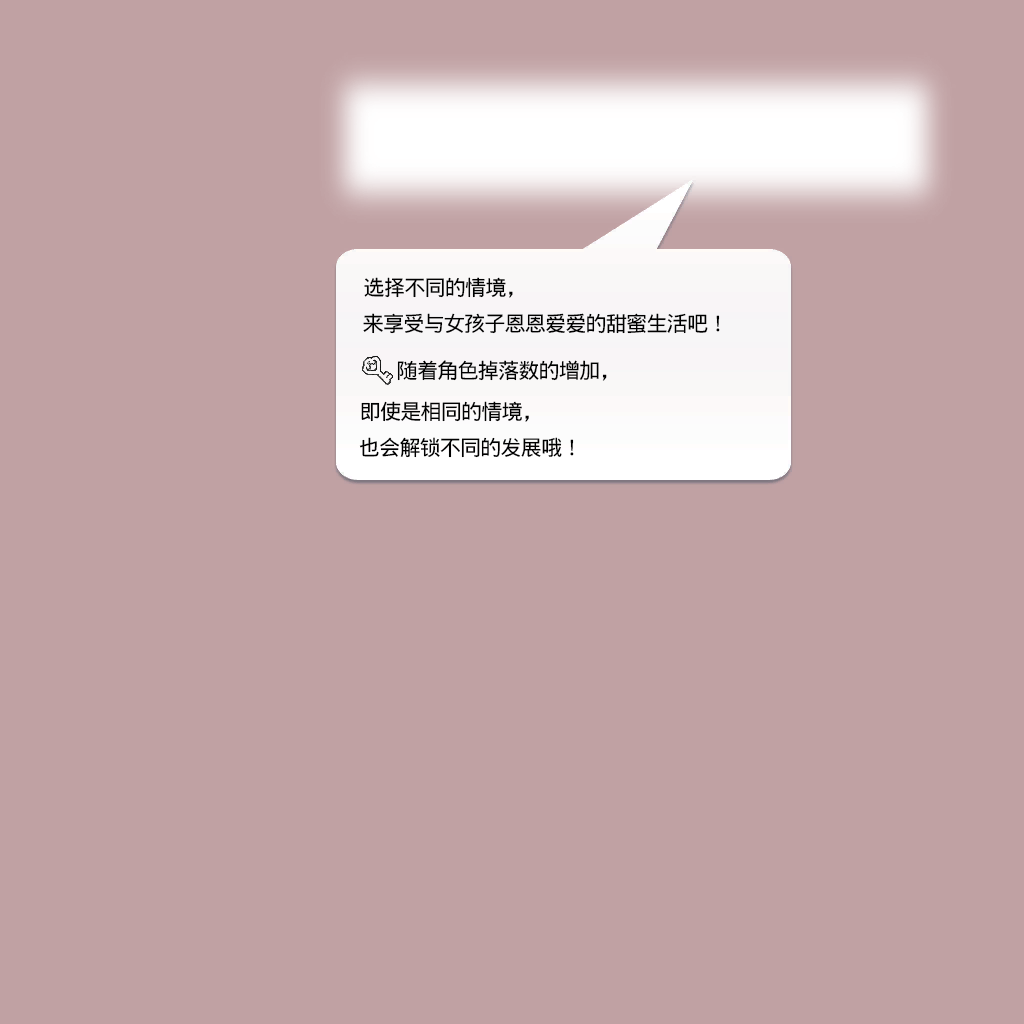
<style>
.page{position:relative;width:1024px;height:1024px;background:#c0a1a3}
.page>*{position:absolute;margin:0}
.t1{font:21.3px "WenQuanYiMicroHeiMono";letter-spacing:-0.05em;color:#000000}
</style>
<div class="page">
<p class="t1" style="left:364px;top:277px;width:149px;height:21px">选择不同的情境，</p>
<p class="t1" style="left:363px;top:313px;width:357px;height:21px">来享受与女孩子恩恩爱爱的甜蜜生活吧！</p>
<p class="t1" style="left:397px;top:360px;width:210px;height:21px">随着角色掉落数的增加，</p>
<p class="t1" style="left:361px;top:401px;width:168px;height:21px">即使是相同的情境，</p>
<p class="t1" style="left:359px;top:437px;width:215px;height:21px">也会解锁不同的发展哦！</p>
</div>
